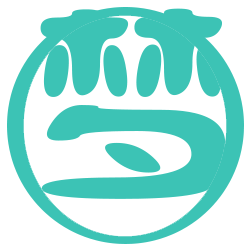
<style>
.page{position:relative;width:250px;height:250px;background:#ffffff}
.page>*{position:absolute;margin:0}
.t1{font:210px "SXSLST";color:#3cc3b5}
</style>
<div class="page">
<p class="t1" style="left:40px;top:8px;width:186px;height:191px">梦</p>
</div>
